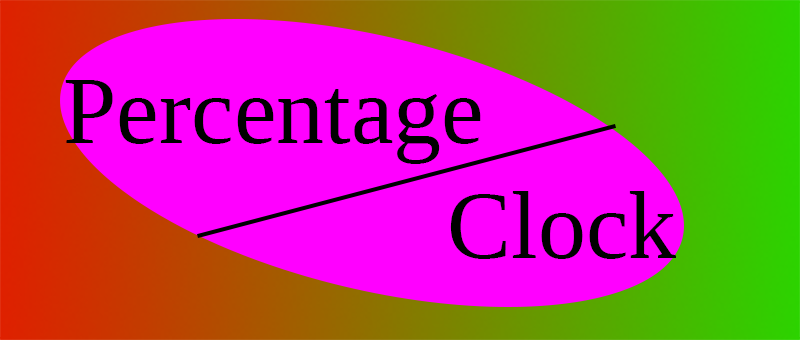
<style>
.page{position:relative;width:800px;height:340px;background:#ff00ff}
.page>*{position:absolute;margin:0}
.t1{font:96px "LiberationSerif";color:#000000}
</style>
<div class="page">
<p class="t1" style="left:65px;top:80px;width:611px;height:179px">Percentage<br>      Clock</p>
</div>
